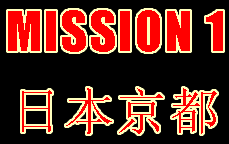
<style>
.page{position:relative;width:229px;height:144px;background:#000000}
.page>*{position:absolute;margin:0}
.t1{font:50px "Impact";letter-spacing:0.05em;color:#ff0000}
.t2{font:50px "SimSun";letter-spacing:0.05em;color:#ff0000}
</style>
<div class="page">
<p class="t1" style="left:8px;top:10px;width:215px;height:42px">MISSION 1</p>
<p class="t2" style="left:22px;top:88px;width:195px;height:46px">日本京都</p>
</div>
